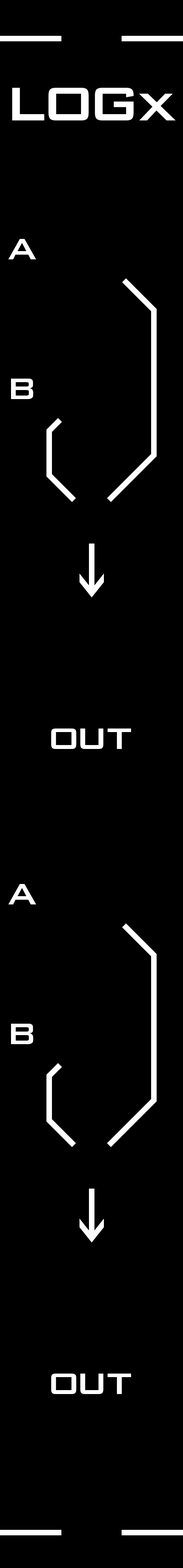
<style>
.page{position:relative;width:183px;height:1568px;background:#000000}
.page>*{position:absolute;margin:0}
.t1{font:63px "BankGothicBT-Medium";letter-spacing:-0.08em;color:#ffffff}
.t2{font:63px "BankGothicBT-Medium";letter-spacing:-0.14em;color:#ffffff}
.t3{font:39.4px "BankGothicBT-Medium";letter-spacing:-0.06em;color:#ffffff}
.t4{font:39.4px "BankGothicBT-Medium";letter-spacing:-0.14em;color:#ffffff}
.t5{font:39.4px "BankGothicBT-Medium";letter-spacing:-0.04em;color:#ffffff}
.t6{font:39.4px "BankGothicBT-Medium";color:#ffffff}
</style>
<div class="page">
<p class="t1" style="left:12px;top:88px;width:164px;height:32px">L<span class="t2">O</span>Gx</p>
<p class="t3" style="left:8px;top:239px;width:28px;height:20px">A</p>
<p class="t3" style="left:11px;top:379px;width:22px;height:20px">B</p>
<p class="t4" style="left:51px;top:729px;width:80px;height:20px">O<span class="t5">U</span><span class="t6">T</span></p>
<p class="t3" style="left:8px;top:884px;width:28px;height:20px">A</p>
<p class="t3" style="left:11px;top:1024px;width:22px;height:20px">B</p>
<p class="t4" style="left:51px;top:1374px;width:80px;height:20px">O<span class="t5">U</span><span class="t6">T</span></p>
</div>
